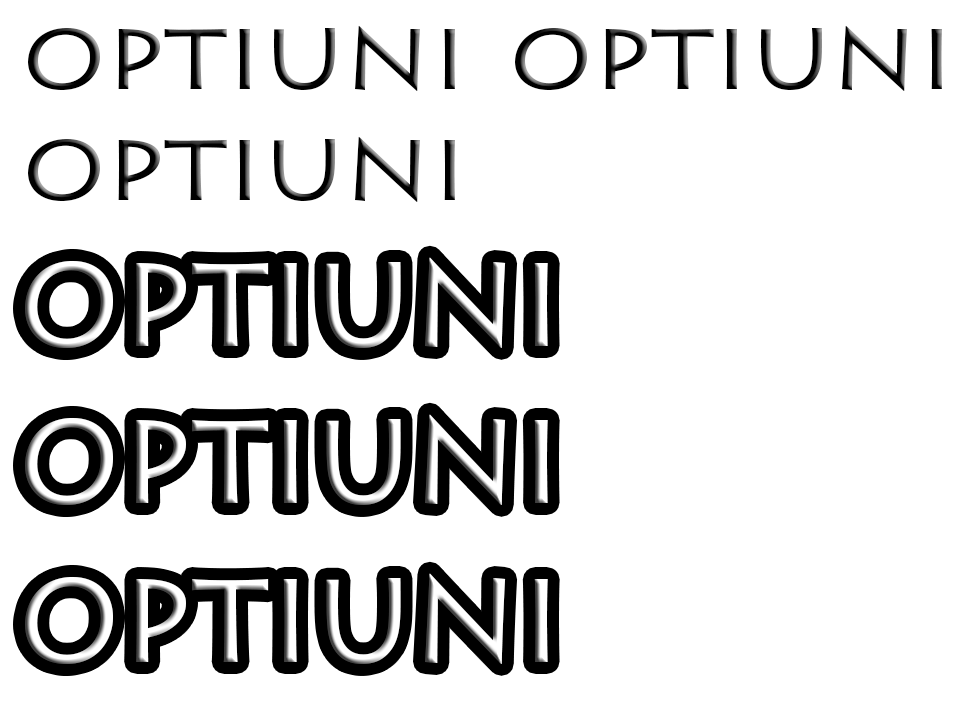
<style>
.page{position:relative;width:980px;height:720px;background:#ffffff}
.page>*{position:absolute;margin:0}
.t1{font:101.4px "LithosPro-Regular";scale:1.07 1}
.t2{font:139.5px "LithosPro-Regular";scale:0.95 1}
</style>
<div class="page">
<p class="t1" style="left:28px;top:25px;width:428px;height:66px">optiuni</p>
<p class="t1" style="left:515px;top:25px;width:428px;height:66px">optiuni</p>
<p class="t1" style="left:28px;top:136px;width:428px;height:66px">optiuni</p>
<p class="t2" style="left:25px;top:257px;width:523px;height:91px">optiuni</p>
<p class="t2" style="left:25px;top:414px;width:523px;height:91px">optiuni</p>
<p class="t2" style="left:25px;top:573px;width:523px;height:91px">optiuni</p>
</div>
